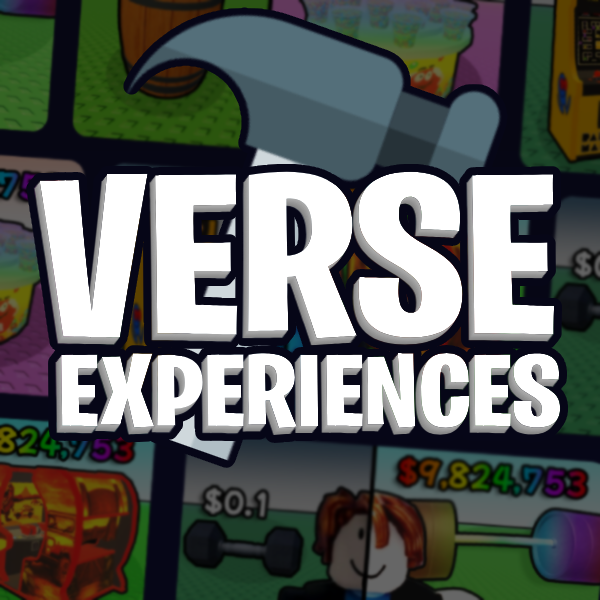
<style>
.page{position:relative;width:600px;height:600px;background:#ffffff}
.page>*{position:absolute;margin:0}
.t1{font:228.7px "BurbankBigCondensed-Bold";color:#ffffff;scale:1.25 1}
.t2{font:102.5px "BurbankBigCondensed-Bold";color:#ffffff;scale:1.25 1}
</style>
<div class="page">
<p class="t1" style="left:39px;top:171px;width:516px;height:168px">VERSE</p>
<p class="t2" style="left:61px;top:353px;width:500px;height:75px">EXPERIENCES</p>
</div>
